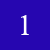
<style>
.page{position:relative;width:50px;height:50px;background:#2606b0}
.page>*{position:absolute;margin:0}
.t1{font:30px "TimesNewRomanPSMT";color:#ffffff}
</style>
<div class="page">
<p class="t1" style="left:21px;top:15px;width:8px;height:20px">1</p>
</div>
